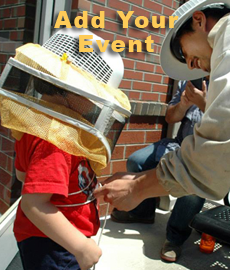
<style>
.page{position:relative;width:230px;height:270px}
.page>*{position:absolute;margin:0}
.t1{font:23px/24px "Arial-Black";letter-spacing:0.065em;color:#fdcb58}
</style>
<div class="page">
<p class="t1" style="left:54px;top:11px;width:125px;height:41px;text-align:center">Add Your Event</p>
</div>
